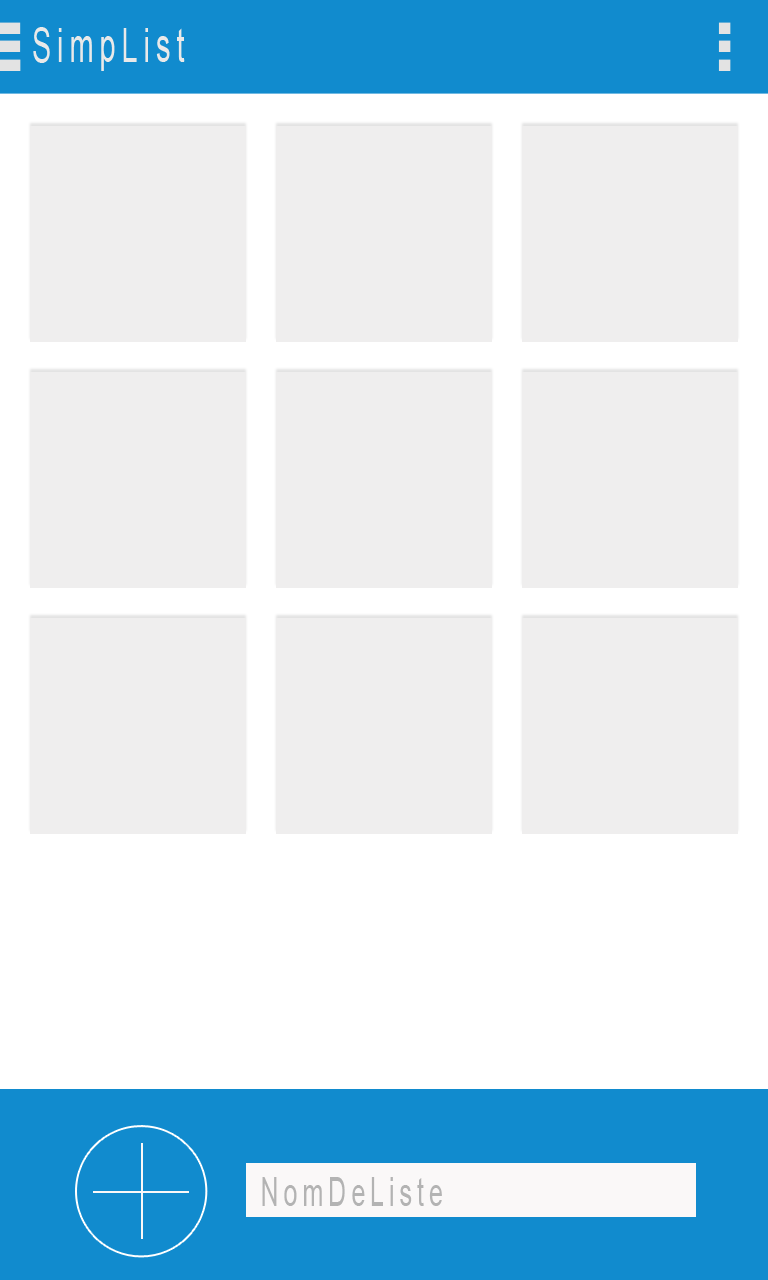
<style>
.page{position:relative;width:768px;height:1280px;background:#efeeee}
.page>*{position:absolute;margin:0}
.t1{font:46.7px "ArialMT";letter-spacing:0.2em;color:#e9e9e9;scale:0.62 1}
.t2{font:40px "ArialMT";letter-spacing:0.2em;color:#b3b3b3;scale:0.62 1}
</style>
<div class="page">
<p class="t1" style="left:33px;top:27px;width:152px;height:44px">SimpList</p>
<p class="t2" style="left:262px;top:1177px;width:180px;height:29px">NomDeListe</p>
</div>
